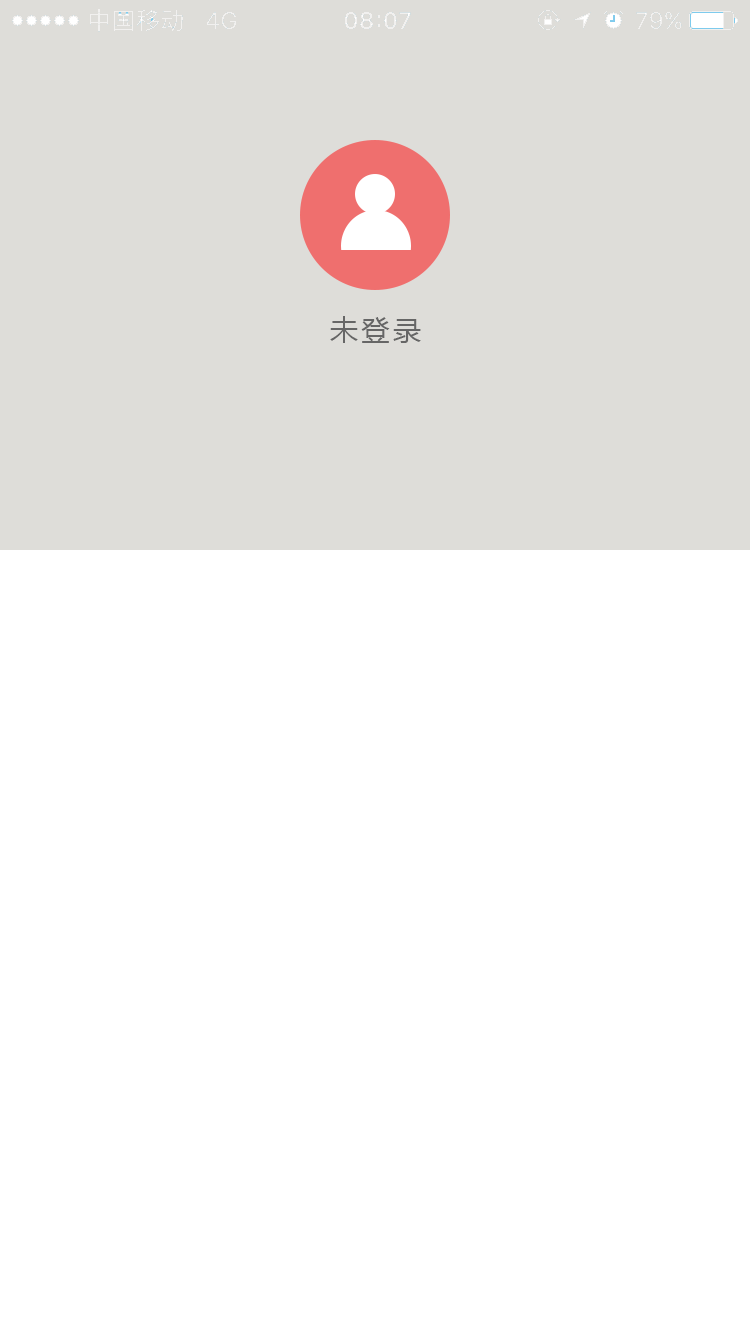
<style>
.page{position:relative;width:750px;height:1334px;background:#ffffff}
.page>*{position:absolute;margin:0}
.t1{font:28px "MicrosoftYaHei";letter-spacing:0.13em;color:#666666}
</style>
<div class="page">
<p class="t1" style="left:330px;top:316px;width:91px;height:27px">未登录</p>
</div>
